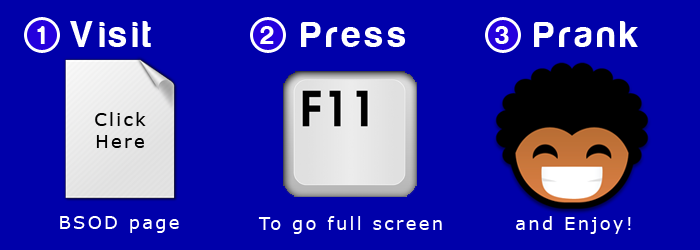
<style>
.page{position:relative;width:700px;height:250px;background:#0000aa}
.page>*{position:absolute;margin:0}
.t1{font:27px "Harabara";letter-spacing:0.125em;color:#ffffff}
.t2{font:37.8px "Harabara";letter-spacing:0.125em;color:#ffffff}
.t3{font:18px "Verdana";letter-spacing:0.125em;color:#000000}
.t4{font:18px "Verdana";letter-spacing:0.125em;color:#ffffff}
</style>
<div class="page">
<p class="t1" style="left:37px;top:26px;width:8px;height:18px">1</p>
<p class="t2" style="left:70px;top:21px;width:81px;height:26px">Visit</p>
<p class="t1" style="left:260px;top:26px;width:14px;height:18px">2</p>
<p class="t2" style="left:301px;top:22px;width:105px;height:25px">Press</p>
<p class="t1" style="left:495px;top:26px;width:14px;height:18px">3</p>
<p class="t2" style="left:534px;top:21px;width:104px;height:26px">Prank</p>
<p class="t3" style="left:95px;top:112px;width:51px;height:36px;text-align:center">Click<br>Here</p>
<p class="t4" style="left:60px;top:216px;width:119px;height:17px">BSOD page</p>
<p class="t4" style="left:258px;top:216px;width:184px;height:18px">To go full screen</p>
<p class="t4" style="left:516px;top:216px;width:115px;height:18px">and Enjoy!</p>
</div>
